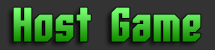
<style>
.page{position:relative;width:215px;height:50px;background:#333333}
.page>*{position:absolute;margin:0}
.t1{font:47.9px "Whitestone-Bold"}
</style>
<div class="page">
<p class="t1" style="left:13px;top:7px;width:188px;height:35px">Host Game</p>
</div>
